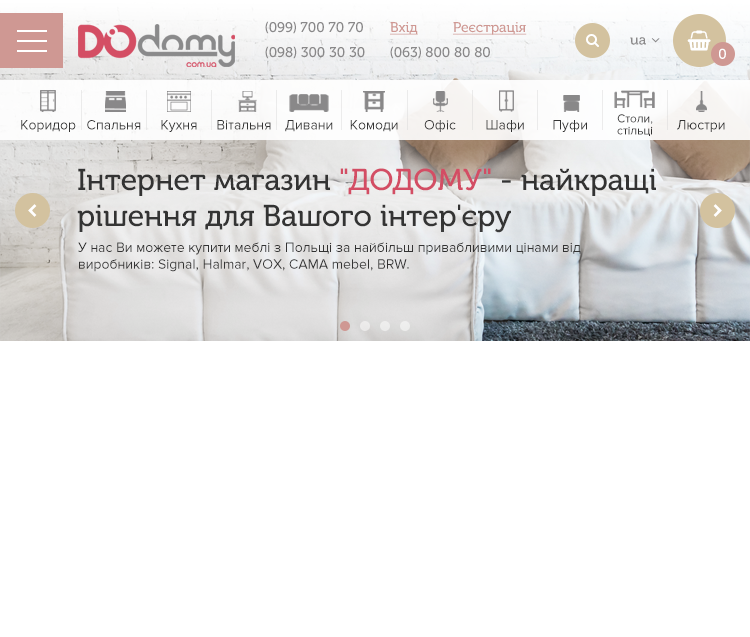
<style>
.page{position:relative;width:750px;height:637px;background:#ffffff}
.page>*{position:absolute;margin:0}
.t1{font:14px "MuseoCyrl-500";color:#898889}
.t2{font:14px "MuseoCyrl-500";color:#cf9893;text-decoration:underline}
.t3{font:14px "MuseoCyrl-500";color:#ffffff}
.t4{font:14px "ProximaNova-Regular";color:#333333}
.t5{font:12px/12px "ProximaNova-Regular";color:#333333}
.t6{font:30px "MuseoCyrl-500";color:#333333}
.t7{font:30px "MuseoCyrl-500";color:#d34d64}
</style>
<div class="page">
<p class="t1" style="left:265px;top:21px;width:98px;height:13px">(099) 700 70 70</p>
<p class="t2" style="left:390px;top:22px;width:28px;height:13px">Вхід</p>
<p class="t2" style="left:453px;top:22px;width:74px;height:13px">Реєстрація</p>
<p class="t1" style="left:630px;top:37px;width:16px;height:8px">ua</p>
<p class="t1" style="left:265px;top:46px;width:100px;height:13px">(098) 300 30 30</p>
<p class="t1" style="left:390px;top:46px;width:100px;height:13px">(063) 800 80 80</p>
<p class="t3" style="left:719px;top:48px;width:7px;height:11px">0</p>
<p class="t4" style="left:21px;top:120px;width:55px;height:12px">Коридор</p>
<p class="t4" style="left:87px;top:120px;width:54px;height:10px">Спальня</p>
<p class="t4" style="left:161px;top:120px;width:36px;height:12px">Кухня</p>
<p class="t4" style="left:217px;top:120px;width:54px;height:10px">Вітальня</p>
<p class="t4" style="left:285px;top:120px;width:48px;height:12px">Дивани</p>
<p class="t4" style="left:350px;top:120px;width:48px;height:12px">Комоди</p>
<p class="t4" style="left:424px;top:120px;width:32px;height:12px">Офіс</p>
<p class="t4" style="left:486px;top:120px;width:38px;height:12px">Шафи</p>
<p class="t4" style="left:553px;top:120px;width:34px;height:12px">Пуфи</p>
<p class="t5" style="left:617px;top:114px;width:36px;height:22px;text-align:center">Столи,<br>стільці</p>
<p class="t4" style="left:677px;top:120px;width:48px;height:12px">Люстри</p>
<p class="t6" style="left:77px;top:168px;width:579px;height:65px">Інтернет магазин <span class="t7">"ДОДОМУ"</span> - найкращі<br>рішення для Вашого інтер'єру</p>
<p class="t4" style="left:78px;top:242px;width:503px;height:30px">У нас Ви можете купити меблі з Польщі за найбільш привабливими цінами від<br>виробників: Signal, Halmar, VOX, CAMA mebel, BRW.</p>
</div>
